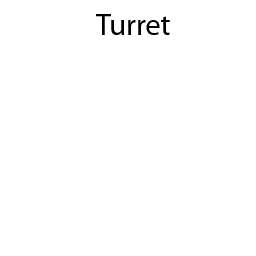
<style>
.page{position:relative;width:256px;height:256px;background:#ffffff}
.page>*{position:absolute;margin:0}
.t1{font:30px "MyriadPro-Regular";color:#000000}
</style>
<div class="page">
<p class="t1" style="left:96px;top:14px;width:74px;height:21px">Turret</p>
</div>
